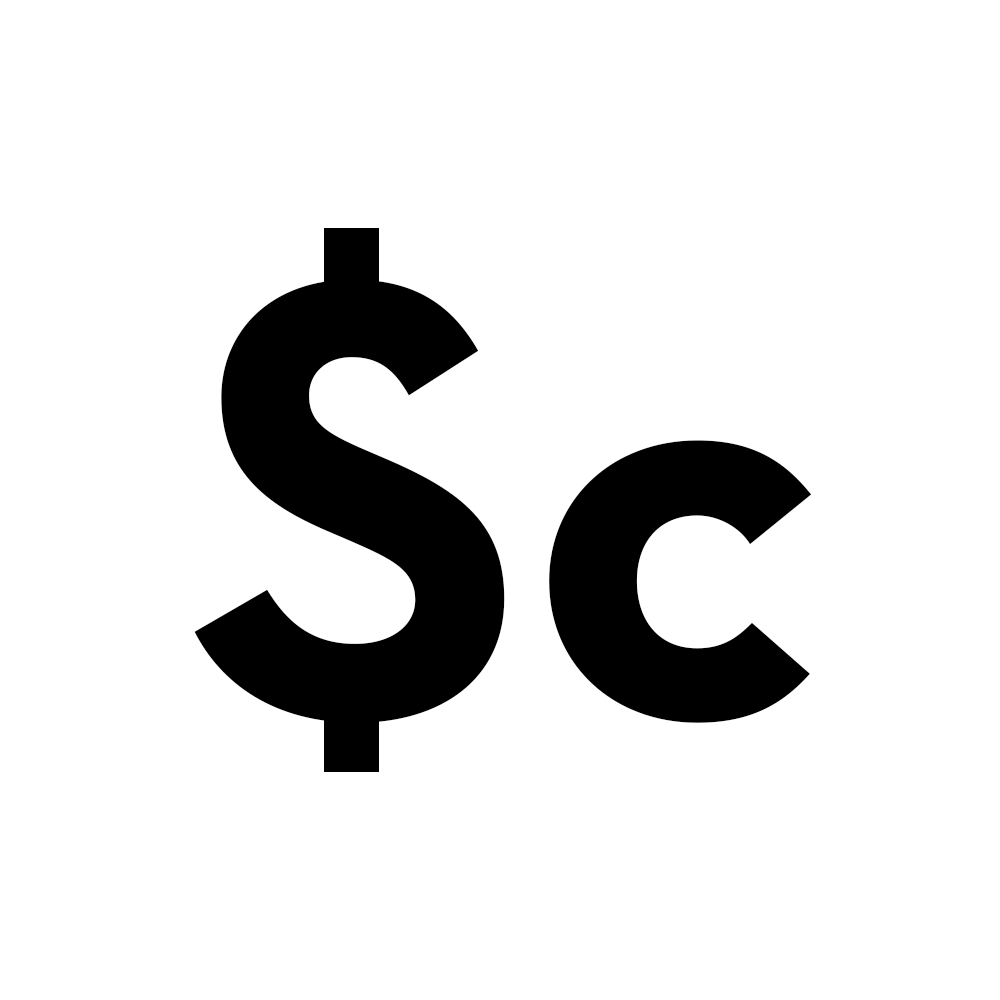
<style>
.page{position:relative;width:1000px;height:1000px;background:#ffffff}
.page>*{position:absolute;margin:0}
.t1{font:635.7px "NeutraText-Bold";letter-spacing:-0.005em;color:#000000}
</style>
<div class="page">
<p class="t1" style="left:194px;top:279px;width:618px;height:444px">Sc</p>
</div>
